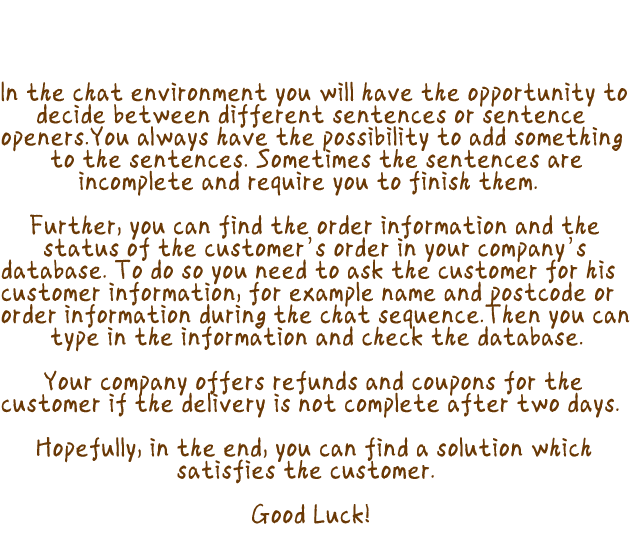
<style>
.page{position:relative;width:630px;height:551px;background:#ffffff}
.page>*{position:absolute;margin:0}
.t1{font:26.9px/22.2px "AaJoe";color:#6a3906;scale:0.87 1}
</style>
<div class="page">
<p class="t1" style="left:1px;top:81px;width:629px;height:443px">In the chat environment you will have the opportunity to<br>     decide between different sentences or sentence <br>openers.You always have the possibility to add something<br>       to the sentences. Sometimes the sentences are <br>           incomplete and require you to finish them.<br><br>    Further, you can find the order information and the<br>      status of the customer’s order in your company’s <br>database. To do so you need to ask the customer for his <br>customer information, for example name and postcode or<br>order information during the chat sequence.Then you can<br>       type in the information and check the database.<br><br>      Your company offers refunds and coupons for the <br>customer if the delivery is not complete after two days.<br><br>     Hopefully, in the end, you can find a solution which<br>                         satisfies the customer.<br><br>         Good Luck!</p>
</div>
